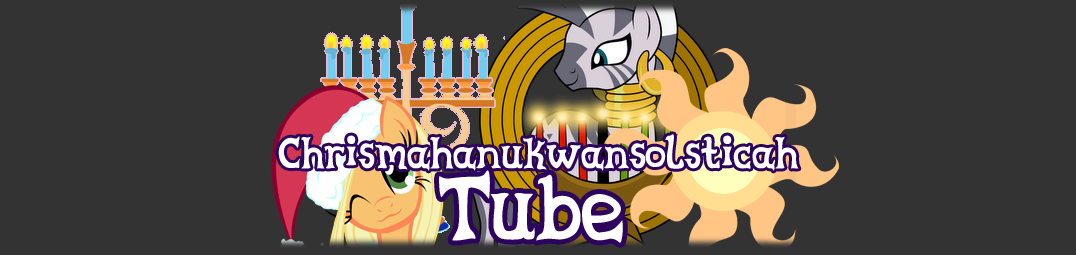
<style>
.page{position:relative;width:1076px;height:255px;background:#333333}
.page>*{position:absolute;margin:0}
.t1{font:48px "CelestiaReduxMedium";color:#ffffff}
.t2{font:100px "CelestiaReduxMedium";color:#ffffff}
</style>
<div class="page">
<p class="t1" style="left:278px;top:134px;width:521px;height:37px">Chrismahanukwansolsticah</p>
<p class="t2" style="left:439px;top:170px;width:184px;height:73px">Tube</p>
</div>
